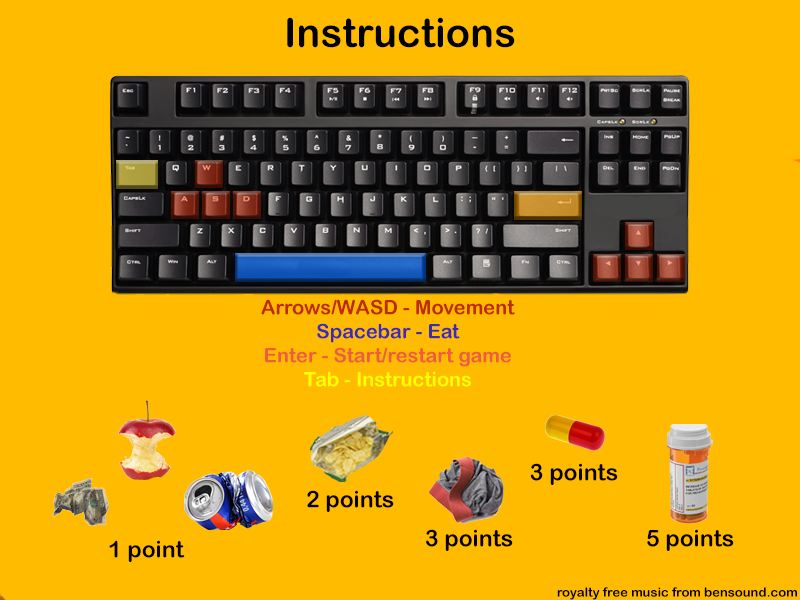
<style>
.page{position:relative;width:800px;height:600px;background:#ffbb00}
.page>*{position:absolute;margin:0}
.t1{font:40px "ArialRoundedMTBold";color:#000003}
.t2{font:20px "ArialRoundedMTBold";color:#f05c3d}
.t3{font:20px "ArialRoundedMTBold";color:#be2a03}
.t4{font:20px "ArialRoundedMTBold";color:#3e2bb0}
.t5{font:20px "ArialRoundedMTBold";color:#faff00}
.t6{font:23px "ArialRoundedMTBold";color:#080000}
.t7{font:13px "ArialRoundedMTBold";color:#080000}
</style>
<div class="page">
<p class="t1" style="left:287px;top:17px;width:228px;height:31px">Instructions</p>
<p class="t2" style="left:261px;top:299px;width:254px;height:88px;text-align:center"><span class="t3">Arrows/WASD - Movement<br></span><span class="t4">Spacebar - Eat<br></span>Enter - Start/restart game<br><span class="t5">Tab - Instructions</span></p>
<p class="t6" style="left:530px;top:463px;width:88px;height:22px">3 points</p>
<p class="t6" style="left:307px;top:490px;width:87px;height:22px">2 points</p>
<p class="t6" style="left:426px;top:529px;width:87px;height:22px">3 points</p>
<p class="t6" style="left:647px;top:529px;width:87px;height:22px">5 points</p>
<p class="t6" style="left:109px;top:540px;width:76px;height:22px">1 point</p>
<p class="t7" style="left:557px;top:587px;width:240px;height:13px">royalty free music from bensound.com</p>
</div>
